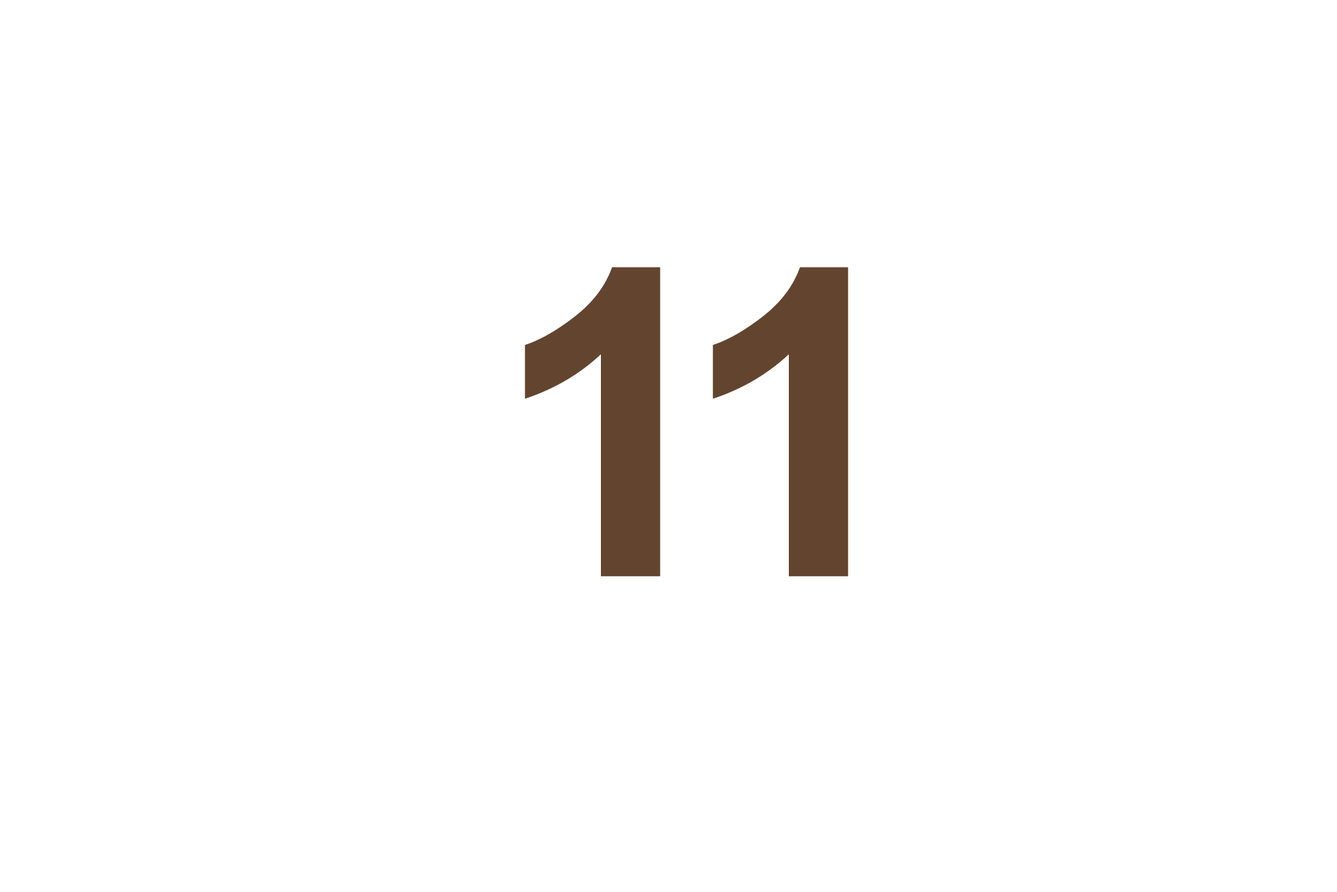
<style>
.page{position:relative;width:1337px;height:892px;background:#ffffff}
.page>*{position:absolute;margin:0}
.t1{font:429.6px "Arial-BoldMT";color:#63442f}
</style>
<div class="page">
<p class="t1" style="left:525px;top:267px;width:324px;height:310px">11</p>
</div>
